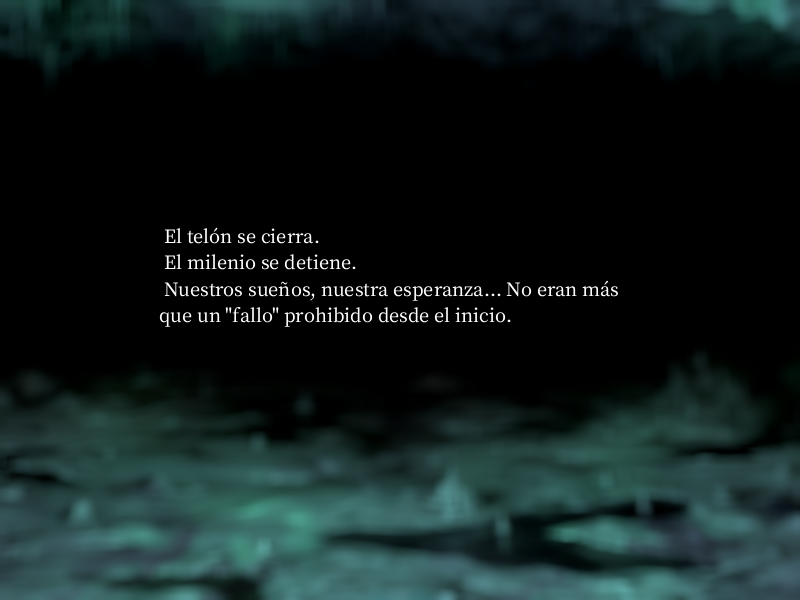
<style>
.page{position:relative;width:800px;height:600px;background:#000000}
.page>*{position:absolute;margin:0}
.t1{font:22px "OfficialFateFont-Medium";color:#ffffff}
</style>
<div class="page">
<p class="t1" style="left:159px;top:227px;width:459px;height:100px">El telón se cierra.<br> El milenio se detiene.<br> Nuestros sueños, nuestra esperanza... No eran más que un "fallo" prohibido desde el inicio.</p>
</div>
